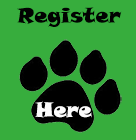
<style>
.page{position:relative;width:136px;height:140px;background:#37ad3d}
.page>*{position:absolute;margin:0}
.t1{font:20.7px "SnapITC-Regular";color:#020202}
.t2{font:20.7px "SnapITC-Regular";color:#fcfcfc}
</style>
<div class="page">
<p class="t1" style="left:17px;top:7px;width:105px;height:20px">Register</p>
<p class="t2" style="left:35px;top:101px;width:57px;height:17px">Here</p>
</div>
